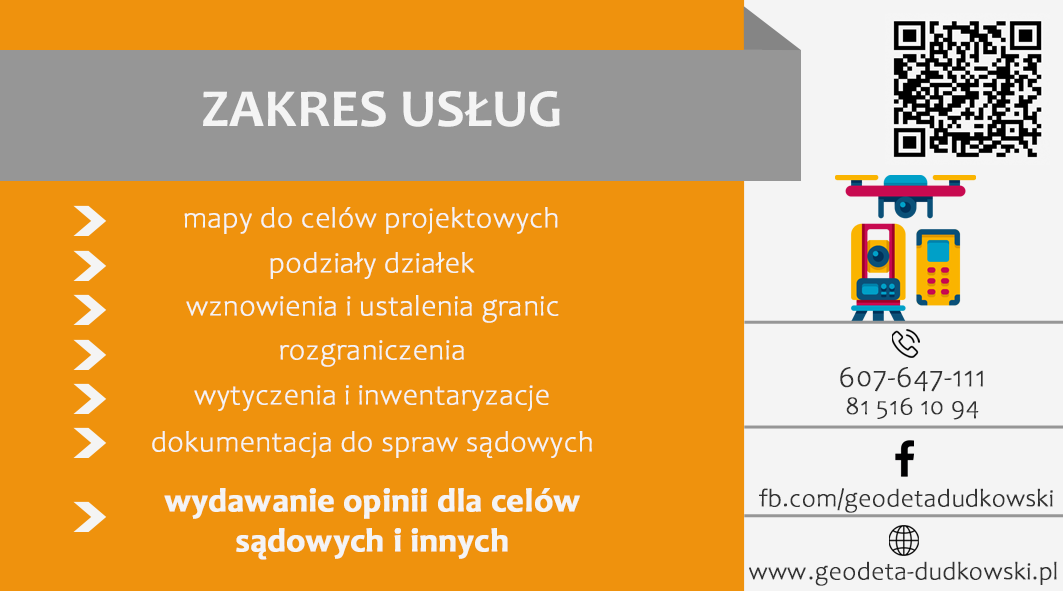
<style>
.page{position:relative;width:1063px;height:591px;background:#ef920d}
.page>*{position:absolute;margin:0}
.t1{font:54px "Candara-Bold";color:#f4f4f4}
.t2{font:29.1px "Candara-Light";color:#f4f4f4;font-weight:bold}
.t3{font:29.1px "Candara-Light";color:#333333;font-weight:bold}
.t4{font:24.9px "Candara-Light";color:#333333;font-weight:bold}
.t5{font:33.2px "Candara-Bold";color:#f4f4f4;font-weight:bold}
</style>
<div class="page">
<p class="t1" style="left:203px;top:91px;width:357px;height:36px">ZAKRES USŁUG</p>
<p class="t2" style="left:184px;top:207px;width:374px;height:27px">mapy do celów projektowych</p>
<p class="t2" style="left:270px;top:252px;width:205px;height:27px">podziały działek</p>
<p class="t2" style="left:186px;top:295px;width:373px;height:28px">wznowienia i ustalenia granic</p>
<p class="t2" style="left:280px;top:340px;width:184px;height:27px">rozgraniczenia</p>
<p class="t3" style="left:840px;top:367px;width:143px;height:25px">607-647-111</p>
<p class="t2" style="left:194px;top:385px;width:355px;height:26px">wytyczenia i inwentaryzacje</p>
<p class="t4" style="left:846px;top:397px;width:133px;height:23px">81 516 10 94</p>
<p class="t2" style="left:152px;top:431px;width:440px;height:27px">dokumentacja do spraw sądowych</p>
<p class="t5" style="left:164px;top:488px;width:416px;height:72px;text-align:center">wydawanie opinii dla celów <br>sądowych i innych</p>
<p class="t4" style="left:759px;top:488px;width:294px;height:25px">fb.com/geodetadudkowski</p>
<p class="t4" style="left:749px;top:561px;width:308px;height:25px">www.geodeta-dudkowski.pl</p>
</div>
